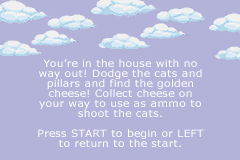
<style>
.page{position:relative;width:240px;height:160px;background:#b3b3d9}
.page>*{position:absolute;margin:0}
.t1{font:10px/10px "Verdana";letter-spacing:0.025em;color:#ffffff;scale:1.07 1}
</style>
<div class="page">
<p class="t1" style="left:38px;top:59px;width:166px;height:88px;text-align:center">You’re in the house with no way out! Dodge the cats and pillars and find the golden cheese! Collect cheese on your way to use as ammo to shoot the cats.<br><br>Press START to begin or LEFT to return to the start.</p>
</div>
